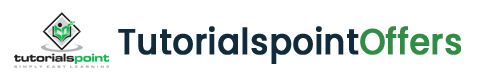
<style>
.page{position:relative;width:500px;height:83px;background:#ffffff}
.page>*{position:absolute;margin:0}
.t1{font:36.1px "Poppins-Medium";color:#0f2b3c;font-weight:bold;scale:0.92 1}
.t2{font:36.1px "Poppins-Medium";letter-spacing:-0.02em;color:#2f8d46;font-weight:bold;scale:0.92 1}
.t3{font:36.1px "Poppins-Medium";color:#2f8d46;font-weight:bold;scale:0.92 1}
</style>
<div class="page">
<p class="t1" style="left:118px;top:26px;width:343px;height:38px">Tutorialspoint<span class="t2">O</span><span class="t3">ffers</span></p>
</div>
